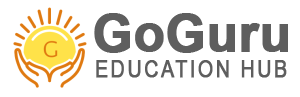
<style>
.page{position:relative;width:300px;height:97px;background:#ffffff}
.page>*{position:absolute;margin:0}
.t1{font:50.7px "Arial-BoldMT";color:#5e5e5e;font-weight:bold}
.t2{font:24px "ArialNarrow";letter-spacing:0.08em;color:#5e5e5e;text-transform:uppercase;font-weight:bold}
</style>
<div class="page">
<p class="t1" style="left:94px;top:13px;width:194px;height:40px">GoGuru</p>
<p class="t2" style="left:96px;top:60px;width:191px;height:18px">Education Hub</p>
</div>
